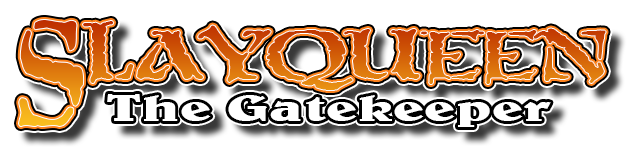
<style>
.page{position:relative;width:630px;height:155px;background:#ffffff}
.page>*{position:absolute;margin:0}
.t1{font:75.4px "SatansMinions";letter-spacing:-0.06em;scale:1.29 1}
.t2{font:160.2px "SatansMinions";letter-spacing:-0.06em;scale:0.76 1}
.t3{font:38px "BelweBT-Bold";color:#ffffff;scale:1.54 1}
</style>
<div class="page">
<p class="t1" style="left:19px;top:20px;width:587px;height:107px"><span class="t2">S</span>LAYQUEEN</p>
<p class="t3" style="left:107px;top:94px;width:444px;height:33px">The Gatekeeper</p>
</div>
